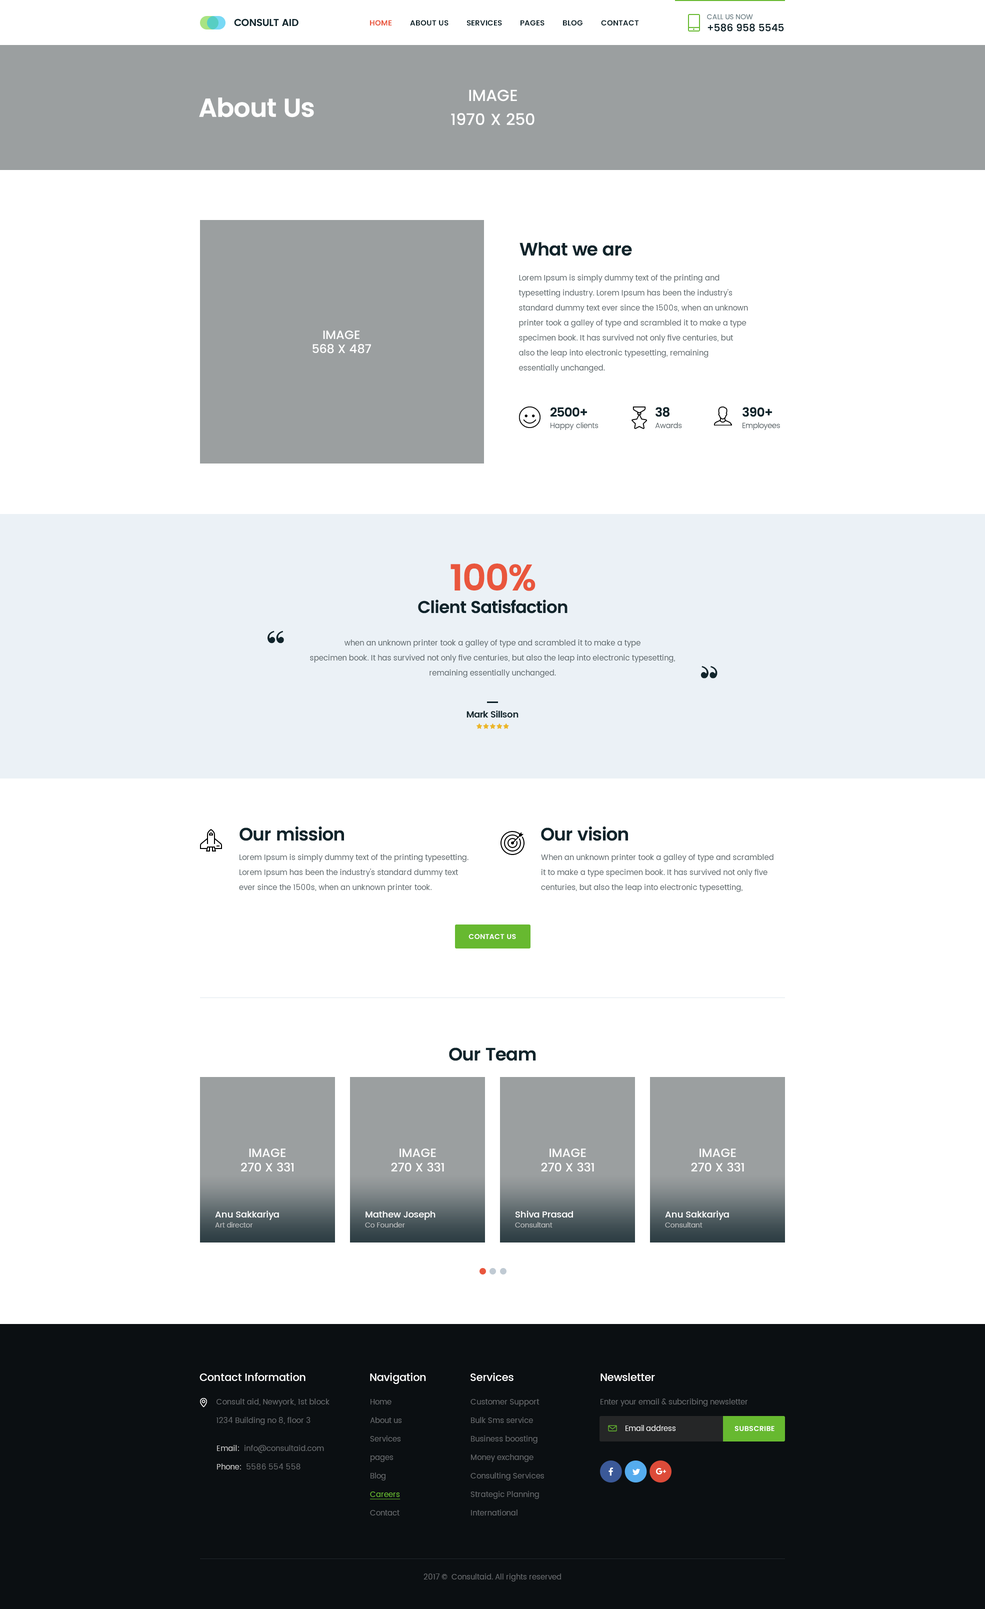
<style>
.page{position:relative;width:985px;height:1609px;background:#ffffff}
.page>*{position:absolute;margin:0}
.t1{font:10px "Poppins-Medium";letter-spacing:-0.005em;color:#10242b;text-transform:uppercase}
.t2{font:7px "Poppins-Regular";letter-spacing:-0.005em;color:#718389;text-transform:uppercase}
.t3{font:7.5px "Poppins-SemiBold";color:#10242b;text-transform:uppercase}
.t4{font:7.5px "Poppins-SemiBold";color:#e9563d;text-transform:uppercase}
.t5{font:16px/24px "Poppins-Medium";color:#ffffff;text-transform:uppercase}
.t6{font:26.1px "Poppins-SemiBold";letter-spacing:-0.03em;color:#ffffff}
.t7{font:18px "Poppins-SemiBold";letter-spacing:-0.03em;color:#10242b}
.t8{font:7.5px/15px "Poppins-Regular";letter-spacing:0.01em;color:#5c666a}
.t9{font:12px "Poppins-Medium";color:#ffffff;text-transform:uppercase}
.t10{font:7.5px/11.5px "Poppins-Light";letter-spacing:-0.01em;color:#5c666a}
.t11{font:12.5px/11.5px "Poppins-SemiBold";letter-spacing:-0.03em;color:#10242b}
.t12{font:17px/22.5px "Poppins-SemiBold";letter-spacing:-0.03em;color:#10242b}
.t13{font:37px/22.5px "Poppins-SemiBold";letter-spacing:-0.03em;color:#e9563d}
.t14{font:40px "BodoniMT-Bold";letter-spacing:-0.075em;color:#10242b}
.t15{font:40.1px "BodoniMT-Bold";letter-spacing:-0.075em;color:#10242b}
.t16{font:9px "Poppins-SemiBold";letter-spacing:-0.03em;color:#10242b}
.t17{font:7px "Poppins-SemiBold";letter-spacing:0.025em;color:#ffffff;text-transform:uppercase}
.t18{font:9px/10px "Poppins-Medium";letter-spacing:-0.01em;color:#ffffff}
.t19{font:7px/10px "Poppins-Regular";letter-spacing:-0.01em;color:#b5b8b9}
.t20{font:10.5px "Poppins-Medium";letter-spacing:-0.01em;color:#ffffff}
.t21{font:7.5px/18.5px "Poppins-Regular";letter-spacing:0.01em;color:#64676a}
.t22{font:7.5px/18.5px "Poppins-Regular";color:#64676a}
.t23{font:7.5px/18.5px "Poppins-Regular";color:#67b930;text-decoration:underline}
.t24{font:7.5px "Poppins-Regular";color:#64676a}
.t25{font:7.2px "Poppins-Regular";color:#ececec}
.t26{font:7.5px/18.5px "Poppins-Regular";letter-spacing:0.01em;color:#c5c5c5}
.t27{font:7.5px/18.5px "Poppins-Regular";letter-spacing:0.01em;color:#c4c4c4}
</style>
<div class="page">
<p class="t1" style="left:707px;top:14px;width:77px;height:18px"><span class="t2">Call us now<br></span>+586 958 5545</p>
<p class="t3" style="left:370px;top:20px;width:269px;height:6px"><span class="t4">Home</span>         about us         services         Pages         blog         contact</p>
<p class="t5" style="left:451px;top:90px;width:83px;height:35px;text-align:center">Image<br>1970 x 250</p>
<p class="t6" style="left:199px;top:98px;width:115px;height:20px">About Us</p>
<p class="t7" style="left:520px;top:242px;width:112px;height:14px">What we are</p>
<p class="t8" style="left:518px;top:274px;width:230px;height:98px">Lorem Ipsum is simply dummy text of the printing and typesetting industry. Lorem Ipsum has been the industry's standard dummy text ever since the 1500s, when an unknown printer took a galley of type and scrambled it to make a type specimen book. It has survived not only five centuries, but also the leap into electronic typesetting, remaining essentially unchanged.</p>
<p class="t9" style="left:312px;top:330px;width:59px;height:24px;text-align:center">Image<br>568 x 487</p>
<p class="t10" style="left:550px;top:407px;width:48px;height:23px"><span class="t11">2500+<br></span>Happy clients</p>
<p class="t10" style="left:655px;top:407px;width:27px;height:21px"><span class="t11">38<br></span>Awards</p>
<p class="t10" style="left:742px;top:407px;width:38px;height:23px"><span class="t11">390+<br></span>Employees</p>
<p class="t12" style="left:418px;top:564px;width:150px;height:50px;text-align:center"><span class="t13">100%<br></span>Client Satisfaction</p>
<p class="t14" style="left:268px;top:630px;width:16px;height:14px">“</p>
<p class="t8" style="left:310px;top:640px;width:365px;height:38px;text-align:center">when an unknown printer took a galley of type and scrambled it to make a type <br>specimen book. It has survived not only five centuries, but also the leap into electronic typesetting, remaining essentially unchanged.</p>
<p class="t15" style="left:700px;top:666px;width:18px;height:12px;rotate:180deg">“</p>
<p class="t16" style="left:466px;top:710px;width:52px;height:8px">Mark Sillson</p>
<p class="t7" style="left:240px;top:826px;width:104px;height:15px">Our mission</p>
<p class="t7" style="left:541px;top:826px;width:87px;height:15px">Our vision</p>
<p class="t8" style="left:239px;top:854px;width:229px;height:38px">Lorem Ipsum is simply dummy text of the printing typesetting. Lorem Ipsum has been the industry's standard dummy text ever since the 1500s, when an unknown printer took.</p>
<p class="t8" style="left:541px;top:854px;width:233px;height:38px">When an unknown printer took a galley of type and scrambled it to make a type specimen book. It has survived not only five centuries, but also the leap into electronic typesetting, remaining essentially unchanged.</p>
<p class="t17" style="left:468px;top:934px;width:48px;height:5px">Contact us</p>
<p class="t7" style="left:449px;top:1048px;width:87px;height:13px">Our Team</p>
<p class="t9" style="left:241px;top:1148px;width:53px;height:24px;text-align:center">Image<br>270 x 331</p>
<p class="t9" style="left:391px;top:1148px;width:53px;height:24px;text-align:center">Image<br>270 x 331</p>
<p class="t9" style="left:541px;top:1148px;width:53px;height:24px;text-align:center">Image<br>270 x 331</p>
<p class="t9" style="left:691px;top:1148px;width:53px;height:24px;text-align:center">Image<br>270 x 331</p>
<p class="t18" style="left:215px;top:1210px;width:64px;height:18px">Anu Sakkariya<br><span class="t19">Art director</span></p>
<p class="t18" style="left:365px;top:1211px;width:71px;height:17px">Mathew Joseph<br><span class="t19">Co Founder</span></p>
<p class="t18" style="left:515px;top:1210px;width:58px;height:18px">Shiva Prasad<br><span class="t19">Consultant</span></p>
<p class="t18" style="left:665px;top:1210px;width:64px;height:18px">Anu Sakkariya<br><span class="t19">Consultant</span></p>
<p class="t20" style="left:200px;top:1372px;width:106px;height:9px">Contact Information</p>
<p class="t20" style="left:370px;top:1372px;width:56px;height:12px">Navigation</p>
<p class="t20" style="left:470px;top:1372px;width:44px;height:9px">Services</p>
<p class="t20" style="left:600px;top:1373px;width:55px;height:8px">Newsletter</p>
<p class="t21" style="left:216px;top:1398px;width:114px;height:27px">Consult aid, Newyork, 1st block <br>1234 Building no 8, floor 3</p>
<p class="t22" style="left:370px;top:1399px;width:32px;height:117px">Home<br>About us<br>Services<br>pages<br>Blog<br><span class="t23">Careers<br></span>Contact</p>
<p class="t21" style="left:470px;top:1399px;width:74px;height:117px">Customer Support<br>Bulk Sms service<br>Business boosting<br>Money exchange<br>Consulting Services<br>Strategic Planning<br>International</p>
<p class="t24" style="left:600px;top:1398px;width:148px;height:8px">Enter your email &amp; subcribing newsletter</p>
<p class="t25" style="left:626px;top:1425px;width:50px;height:6px">Email address</p>
<p class="t17" style="left:734px;top:1426px;width:40px;height:5px">Subscribe</p>
<p class="t21" style="left:217px;top:1445px;width:107px;height:25px"><span class="t26">Email:</span>  info@consultaid.com<br><span class="t27">Phone:</span>  5586 554 558</p>
<p class="t24" style="left:424px;top:1574px;width:137px;height:8px">2017 ©  Consultaid. All rights reserved</p>
</div>
